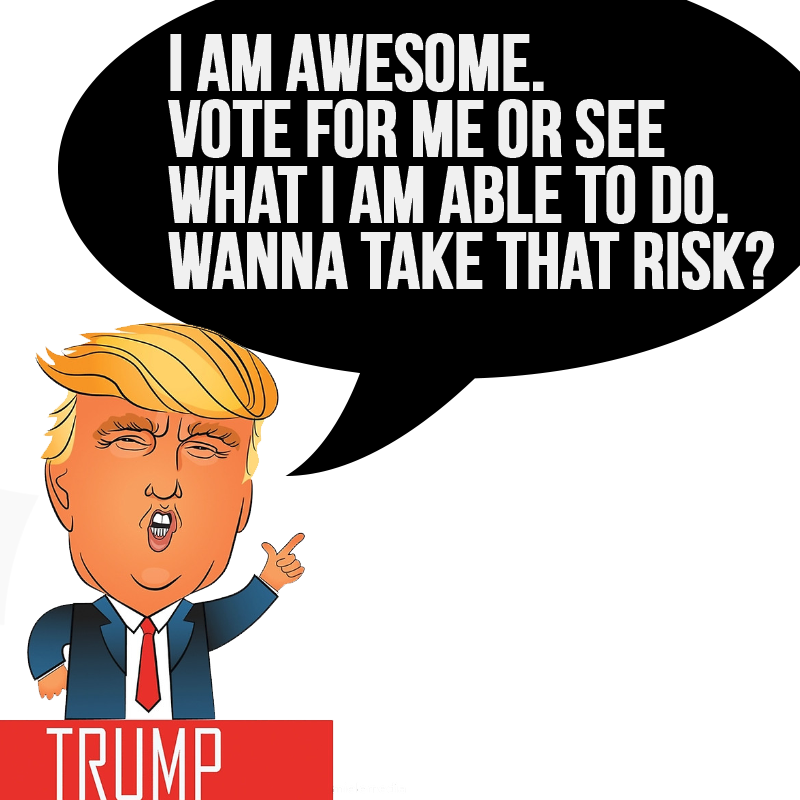
<style>
.page{position:relative;width:800px;height:800px;background:#ffffff}
.page>*{position:absolute;margin:0}
.t1{font:80px/66px "BebasNeue";letter-spacing:-0.02em;color:#f0f0f0;font-weight:bold}
</style>
<div class="page">
<p class="t1" style="left:168px;top:33px;width:606px;height:257px">i am awesome.<br>vote for me or see <br>what i am able to do. <br>wanna TAKE THAT risk?</p>
</div>
